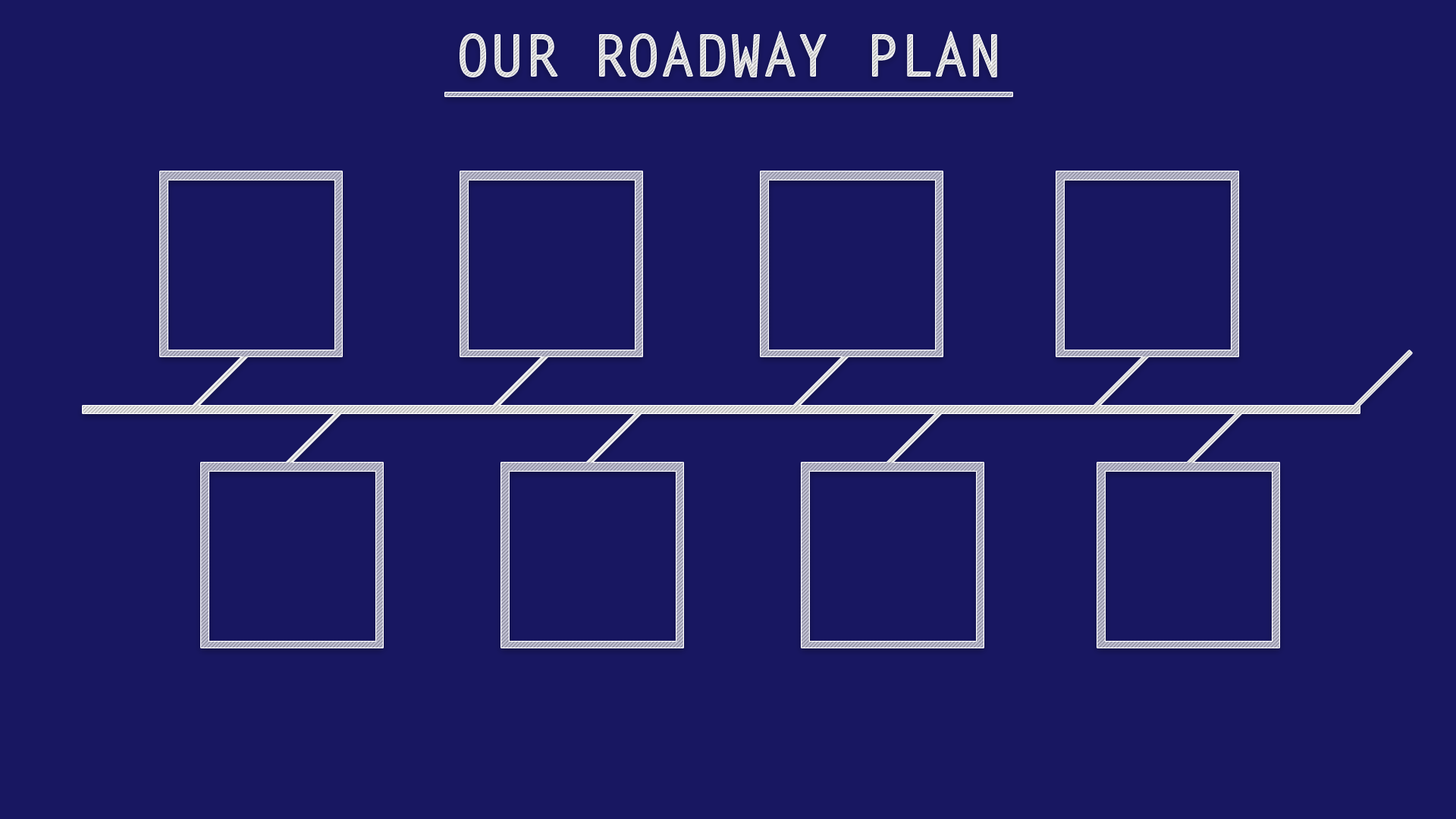
<style>
.page{position:relative;width:1456px;height:819px;background:#181761}
.page>*{position:absolute;margin:0}
.t1{font:56.9px "LetterGothicStd-Bold";color:#dcdcdc}
</style>
<div class="page">
<p class="t1" style="left:460px;top:31px;width:536px;height:46px">OUR ROADWAY PLAN</p>
</div>
